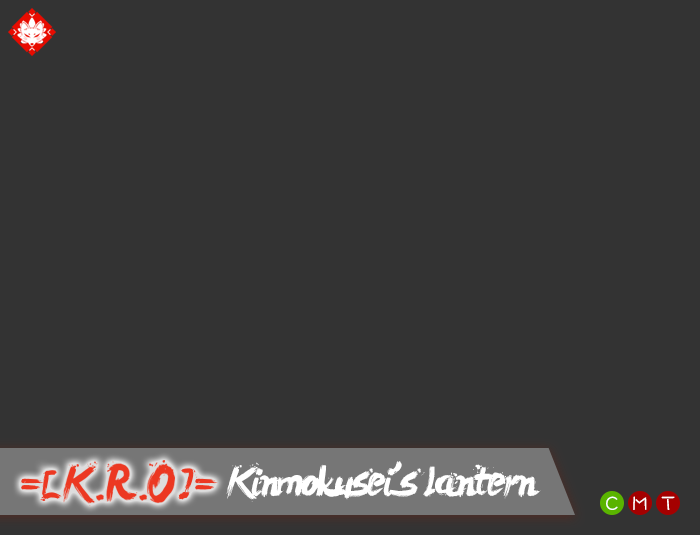
<style>
.page{position:relative;width:700px;height:535px;background:#333333}
.page>*{position:absolute;margin:0}
.t1{font:41.7px "LeviReBrushed";letter-spacing:-0.075em;color:#ffffff}
.t2{font:20px "DFWaWaTC-W5";letter-spacing:-0.075em;color:#ffffff}
</style>
<div class="page">
<p class="t1" style="left:226px;top:461px;width:315px;height:41px">Kinmokusei's lantern</p>
<p class="t2" style="left:606px;top:496px;width:69px;height:14px">C   M   T</p>
</div>
